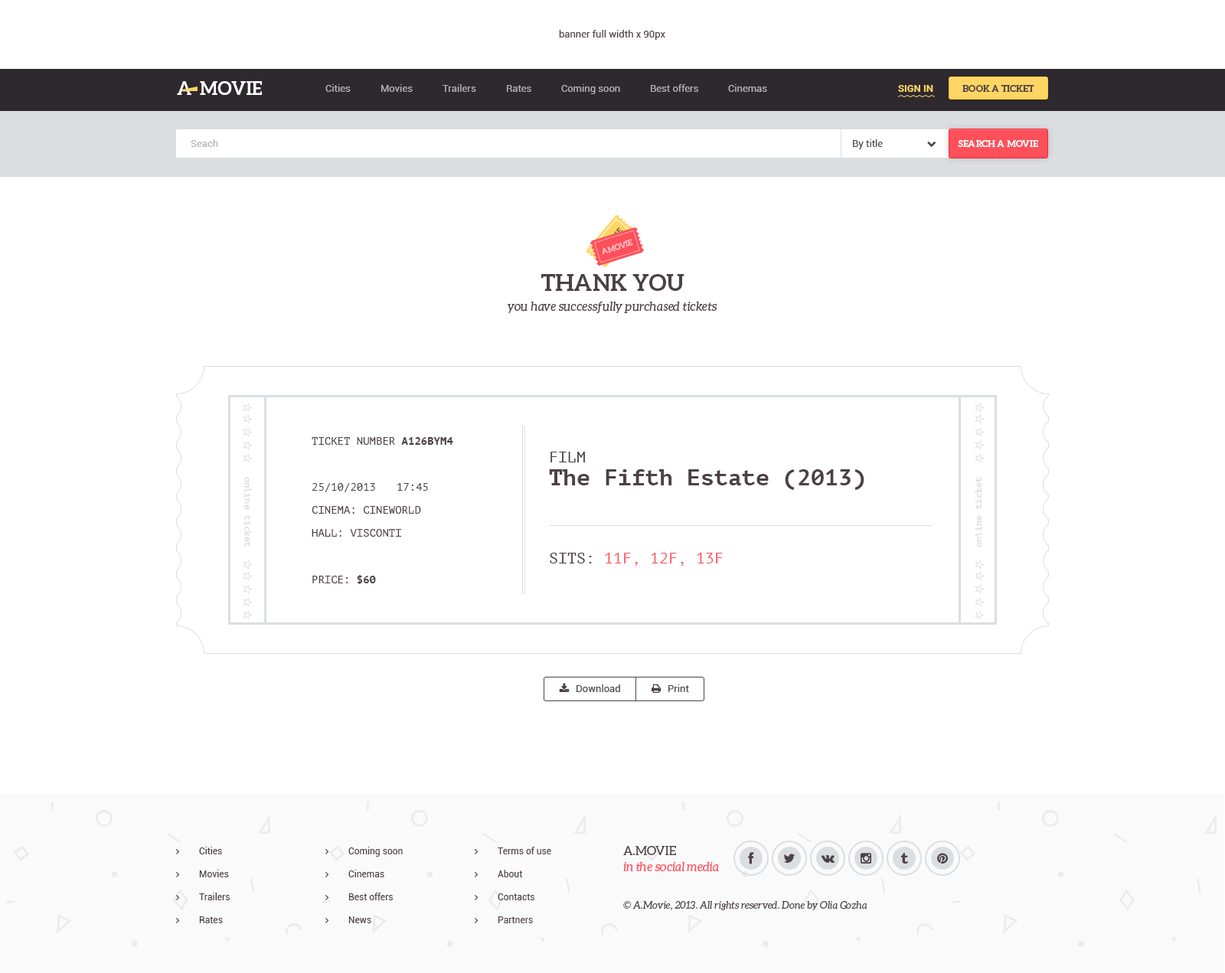
<style>
.page{position:relative;width:1225px;height:973px;background:#ffffff}
.page>*{position:absolute;margin:0}
.t1{font:10px "Roboto-Regular";color:#4c4145}
.t2{font:18.4px "Aleo-Bold";color:#ffffff;text-transform:uppercase}
.t3{font:10px "Roboto-Regular";color:#b4b1b2}
.t4{font:10px "Roboto-Bold";color:#ffd564;text-transform:uppercase}
.t5{font:9.2px "Aleo-Bold";color:#4c4145;text-transform:uppercase}
.t6{font:9.2px "Aleo-Bold";color:#ffffff;text-transform:uppercase}
.t7{font:7.7px "Aleo-Regular";color:#fe505a;text-transform:uppercase}
.t8{font:7.7px "Aleo-Regular";color:#ffd5d7;text-transform:uppercase}
.t9{font:12.3px/19.9px "Aleo-Italic";color:#4c4145}
.t10{font:23px/19.9px "Aleo-Bold";color:#4c4145;text-transform:uppercase}
.t11{font:10.7px "PTMono-Regular";color:#4c4145;text-transform:uppercase}
.t12{font:10.7px "PTMono-Bold";color:#4c4145;text-transform:uppercase}
.t13{font:23px/23px "PTMono-Bold";color:#4c4145}
.t14{font:15.3px/23px "PTMono-Regular";color:#4c4145;text-transform:uppercase}
.t15{font:9.2px "PTMono-Bold";color:#dbdee1}
.t16{font:15.3px "PTMono-Regular";color:#fe505a;text-transform:uppercase}
.t17{font:15.3px "PTMono-Regular";color:#4c4145;text-transform:uppercase}
.t18{font:9.2px "Roboto-Regular";color:#4c4145}
.t19{font:12.3px/16.1px "Aleo-Italic";color:#fe505a}
.t20{font:12.3px/16.1px "Aleo-Regular";color:#4c4145;text-transform:uppercase}
.t21{font:10px "Aleo-Italic";color:#4c4145}
</style>
<div class="page">
<p class="t1" style="left:559px;top:30px;width:106px;height:10px">banner full width x 90px</p>
<p class="t2" style="left:177px;top:81px;width:14px;height:14px">A</p>
<p class="t2" style="left:200px;top:81px;width:62px;height:14px">movie</p>
<p class="t3" style="left:325px;top:84px;width:26px;height:8px">Cities</p>
<p class="t3" style="left:381px;top:84px;width:32px;height:8px">Movies</p>
<p class="t3" style="left:443px;top:84px;width:33px;height:8px">Trailers</p>
<p class="t3" style="left:507px;top:85px;width:24px;height:7px">Rates</p>
<p class="t3" style="left:561px;top:84px;width:59px;height:10px">Coming soon</p>
<p class="t3" style="left:651px;top:84px;width:47px;height:8px">Best offers</p>
<p class="t3" style="left:728px;top:84px;width:39px;height:8px">Cinemas</p>
<p class="t4" style="left:898px;top:85px;width:35px;height:7px">Sign in</p>
<p class="t5" style="left:963px;top:85px;width:72px;height:7px">Book a ticket</p>
<p class="t3" style="left:191px;top:139px;width:27px;height:8px">Seach</p>
<p class="t1" style="left:853px;top:139px;width:30px;height:10px">By title</p>
<p class="t6" style="left:958px;top:140px;width:80px;height:7px">search a movie</p>
<p class="t7" style="left:600px;top:227px;width:23px;height:28px;rotate:-50deg">amovie</p>
<p class="t8" style="left:603px;top:239px;width:30px;height:15px;rotate:-17deg">amovie</p>
<p class="t9" style="left:508px;top:274px;width:210px;height:39px;text-align:center"><span class="t10">Thank you<br></span>you have successfully purchased tickets</p>
<p class="t11" style="left:312px;top:437px;width:141px;height:8px">Ticket number <span class="t12">a126bym4</span></p>
<p class="t13" style="left:549px;top:452px;width:316px;height:38px"><span class="t14">Film<br></span>The Fifth Estate (2013)</p>
<p class="t15" style="left:244px;top:477px;width:7px;height:71px;rotate:90deg">online ticket</p>
<p class="t11" style="left:312px;top:483px;width:63px;height:9px">25/10/2013</p>
<p class="t11" style="left:397px;top:483px;width:31px;height:8px">17:45</p>
<p class="t15" style="left:975px;top:477px;width:7px;height:71px;rotate:-90deg">online ticket</p>
<p class="t11" style="left:312px;top:506px;width:109px;height:8px">Cinema: Cineworld</p>
<p class="t11" style="left:312px;top:529px;width:89px;height:8px">Hall: Visconti</p>
<p class="t16" style="left:550px;top:553px;width:173px;height:13px"><span class="t17">Sits: </span>11F, 12F, 13F</p>
<p class="t11" style="left:312px;top:575px;width:64px;height:9px">price: <span class="t12">$60</span></p>
<p class="t1" style="left:577px;top:685px;width:43px;height:7px">Download</p>
<p class="t1" style="left:668px;top:685px;width:21px;height:7px">Print</p>
<p class="t18" style="left:199px;top:847px;width:23px;height:8px">Cities</p>
<p class="t18" style="left:348px;top:847px;width:55px;height:10px">Coming soon</p>
<p class="t18" style="left:498px;top:847px;width:53px;height:8px">Terms of use</p>
<p class="t19" style="left:623px;top:846px;width:96px;height:26px"><span class="t20">A.Movie <br></span>in the social media</p>
<p class="t18" style="left:199px;top:870px;width:30px;height:8px">Movies</p>
<p class="t18" style="left:348px;top:870px;width:36px;height:8px">Cinemas</p>
<p class="t18" style="left:498px;top:870px;width:25px;height:8px">About</p>
<p class="t18" style="left:199px;top:893px;width:31px;height:8px">Trailers</p>
<p class="t18" style="left:348px;top:893px;width:45px;height:8px">Best offers</p>
<p class="t18" style="left:498px;top:894px;width:36px;height:7px">Contacts</p>
<p class="t21" style="left:623px;top:901px;width:245px;height:9px">© A.Movie, 2013. All rights reserved. Done by Olia Gozha</p>
<p class="t18" style="left:199px;top:917px;width:24px;height:6px">Rates</p>
<p class="t18" style="left:348px;top:917px;width:23px;height:6px">News</p>
<p class="t18" style="left:498px;top:917px;width:35px;height:6px">Partners</p>
</div>
